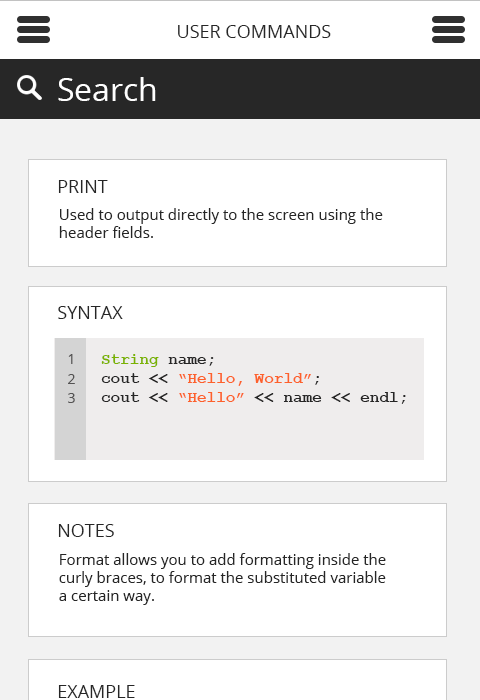
<style>
.page{position:relative;width:480px;height:700px;background:#ffffff}
.page>*{position:absolute;margin:0}
.t1{font:18px "OpenSans";color:#272727}
.t2{font:32px "OpenSans";color:#ffffff}
.t3{font:18px "OpenSans";color:#262626}
.t4{font:15px "OpenSans";color:#262626}
.t5{font:14px "OpenSans";color:#545353}
.t6{font:16px "CourierNewPS-BoldMT";color:#262626}
.t7{font:16px "CourierNewPS-BoldMT";color:#7ab201}
.t8{font:16px "CourierNewPS-BoldMT";color:#fd612b}
</style>
<div class="page">
<p class="t1" style="left:178px;top:25px;width:153px;height:13px">USER COMMANDS</p>
<p class="t2" style="left:58px;top:77px;width:98px;height:24px">Search</p>
<p class="t3" style="left:58px;top:180px;width:50px;height:13px">PRINT</p>
<p class="t4" style="left:59px;top:208px;width:324px;height:30px">Used to output directly to the screen using the <br>header fields.</p>
<p class="t3" style="left:58px;top:306px;width:65px;height:13px">SYNTAX</p>
<p class="t5" style="left:68px;top:354px;width:5px;height:10px">1</p>
<p class="t6" style="left:101px;top:354px;width:305px;height:50px"><span class="t7">String </span>name;<br>cout &lt;&lt; <span class="t8">“Hello, World”</span>;<br>cout &lt;&lt; <span class="t8">“Hello”</span> &lt;&lt; name &lt;&lt; endl;</p>
<p class="t5" style="left:68px;top:374px;width:7px;height:10px">2</p>
<p class="t5" style="left:68px;top:393px;width:7px;height:10px">3</p>
<p class="t3" style="left:58px;top:524px;width:56px;height:13px">NOTES</p>
<p class="t4" style="left:59px;top:553px;width:327px;height:52px">Format allows you to add formatting inside the <br>curly braces, to format the substituted variable <br>a certain way.</p>
<p class="t3" style="left:58px;top:685px;width:77px;height:13px">EXAMPLE</p>
</div>
